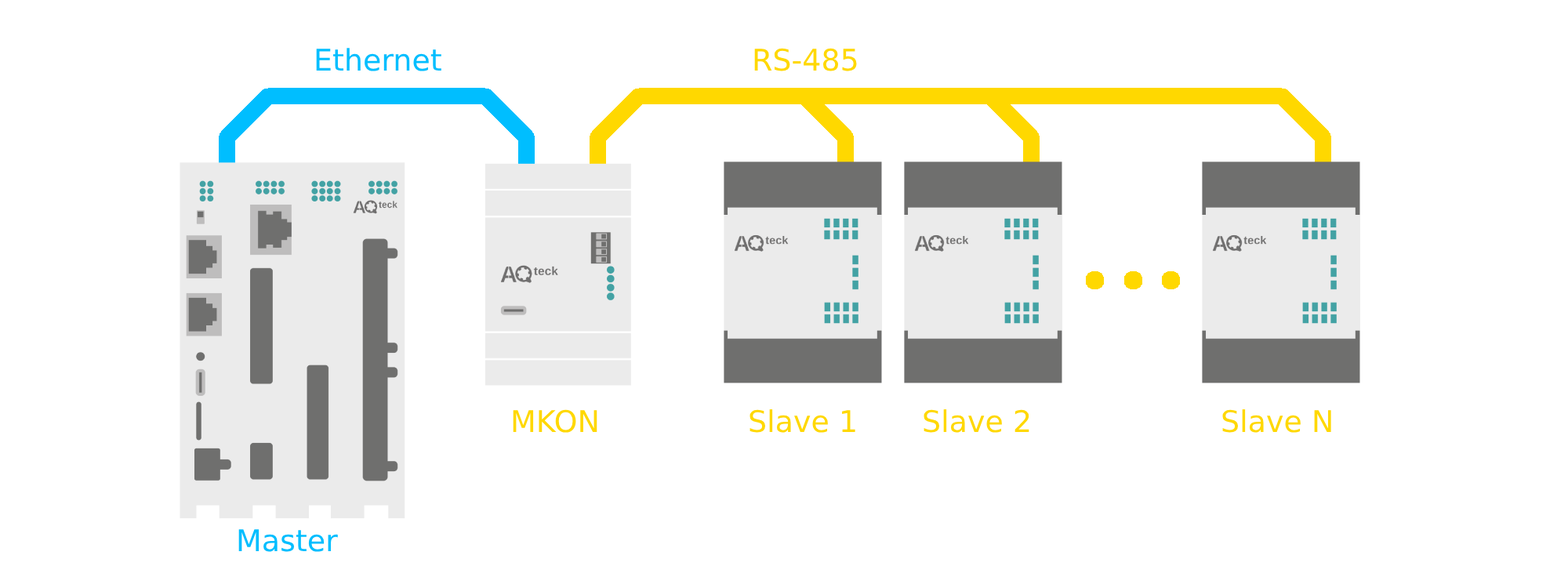
<style>
.page{position:relative;width:1568px;height:588px;background:#ffffff}
.page>*{position:absolute;margin:0}
.t1{font:29.8px "DejaVuSans";color:#00beff}
.t2{font:29.8px "DejaVuSans";color:#ffd800}
</style>
<div class="page">
<p class="t1" style="left:316px;top:48px;width:125px;height:23px"><span class="t2">E</span>thernet</p>
<p class="t2" style="left:754px;top:48px;width:103px;height:23px">RS-485</p>
<p class="t2" style="left:513px;top:409px;width:84px;height:24px">MKON</p>
<p class="t2" style="left:750px;top:409px;width:105px;height:24px">Slave 1</p>
<p class="t2" style="left:924px;top:409px;width:105px;height:24px">Slave 2</p>
<p class="t2" style="left:1222px;top:409px;width:109px;height:24px">Slave N</p>
<p class="t1" style="left:238px;top:529px;width:100px;height:23px">Master</p>
</div>
